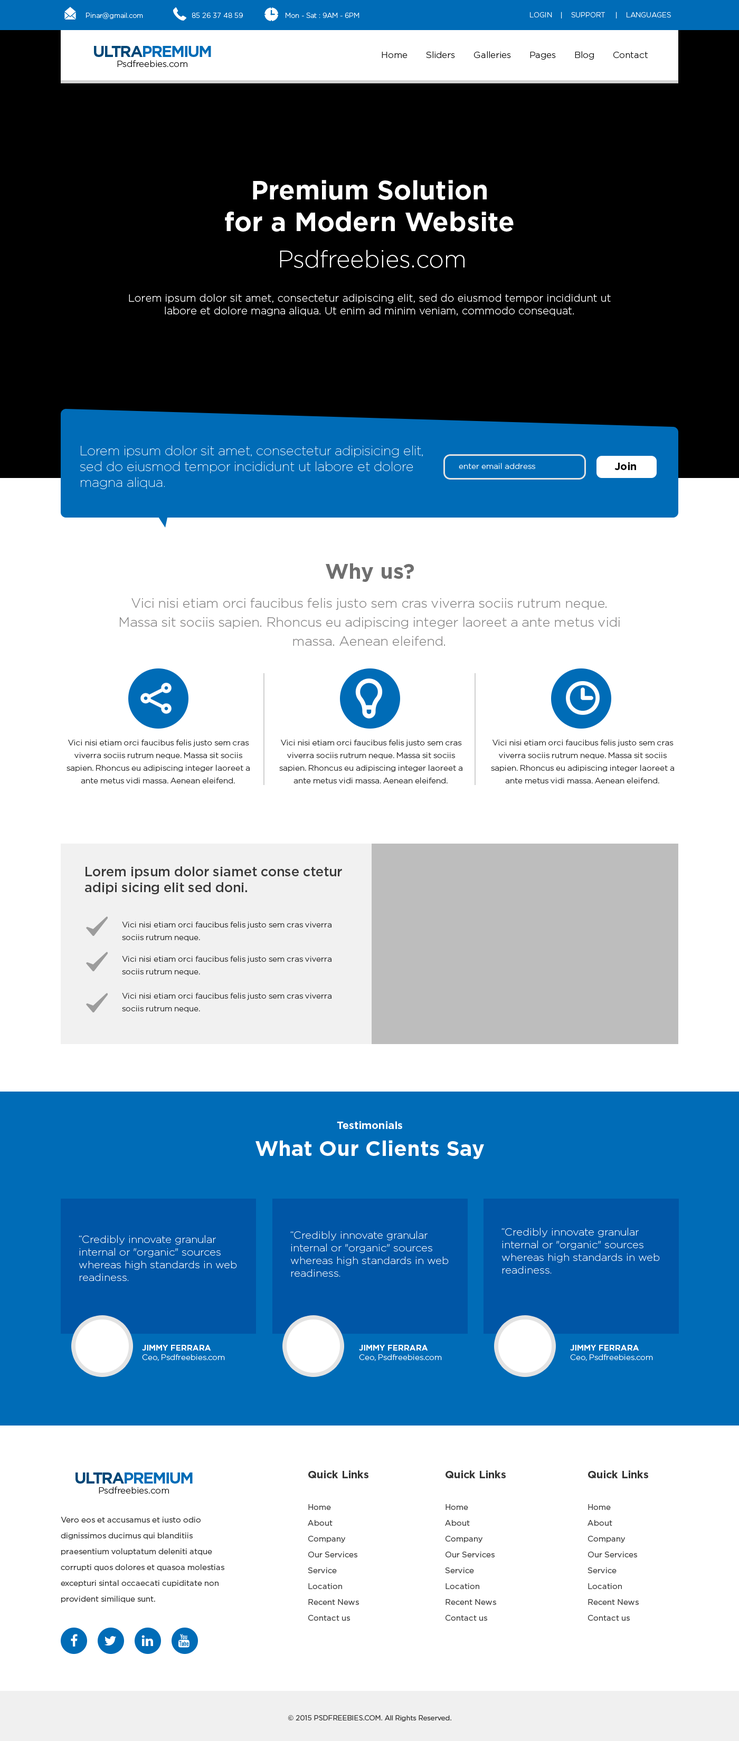
<style>
.page{position:relative;width:739px;height:1741px;background:#ffffff}
.page>*{position:absolute;margin:0}
.t1{font:6.9px "Gotham-Light";color:#ffffff}
.t2{font:15.8px "Gotham-Bold";letter-spacing:-0.075em;color:#006cb7;text-transform:uppercase}
.t3{font:15.8px "Gotham-Bold";letter-spacing:-0.075em;color:#024777;text-transform:uppercase}
.t4{font:9px "Gotham-Light";color:#0a0a0a}
.t5{font:26.4px "Gotham-Bold";color:#ffffff}
.t6{font:23.8px "Gotham-Light";color:#ffffff}
.t7{font:10.6px "Gotham-Light";color:#ffffff}
.t8{font:13.2px "Gotham-Thin";color:#ffffff}
.t9{font:7.9px "Gotham-Light";color:#ffffff}
.t10{font:10.6px "Gotham-Bold";color:#000000}
.t11{font:21.1px "Gotham-Bold";color:#6f6f6f}
.t12{font:13.2px/19px "Gotham-Light";color:#858484}
.t13{font:7.9px/12.7px "Gotham-Light";color:#292929}
.t14{font:13.2px "Gotham-Medium";color:#3b3b3b}
.t15{font:10.6px "Gotham-Bold";color:#ffffff}
.t16{font:21.1px "Gotham-Bold";color:#ffffff}
.t17{font:10.6px "Gotham-ExtraLight";color:#ffffff}
.t18{font:7.9px "Gotham-Bold";color:#ffffff}
.t19{font:7.9px/15.8px "Gotham-Book";color:#363636}
.t20{font:10.6px/15.8px "Gotham-Bold";color:#363636}
.t21{font:7.9px/15.8px "Gotham-Book";color:#303030}
.t22{font:6.9px "Gotham-Book";color:#363636}
</style>
<div class="page">
<p class="t1" style="left:86px;top:13px;width:273px;height:6px">Pinar@gmail.com                       85 26 37 48 59                    Mon - Sat : 9AM - 6PM</p>
<p class="t1" style="left:530px;top:12px;width:141px;height:6px">LOGIN    |    SUPPORT     |    LANGUAGES</p>
<p class="t2" style="left:94px;top:46px;width:117px;height:11px"><span class="t3">ultra</span>premium</p>
<p class="t4" style="left:381px;top:51px;width:266px;height:9px">Home       Sliders       Galleries       Pages       Blog       Contact</p>
<p class="t4" style="left:117px;top:60px;width:70px;height:7px">Psdfreebies.com</p>
<p class="t5" style="left:225px;top:180px;width:288px;height:52px;text-align:center">Premium Solution<br>for a Modern Website</p>
<p class="t6" style="left:280px;top:250px;width:184px;height:18px">Psdfreebies.com</p>
<p class="t7" style="left:129px;top:293px;width:481px;height:23px;text-align:center">Lorem ipsum dolor sit amet, consectetur adipiscing elit, sed do eiusmod tempor incididunt ut labore et dolore magna aliqua. Ut enim ad minim veniam, commodo consequat.</p>
<p class="t8" style="left:80px;top:445px;width:343px;height:44px">Lorem ipsum dolor sit amet, consectetur adipisicing elit, sed do eiusmod tempor incididunt ut labore et dolore magna aliqua.</p>
<p class="t9" style="left:458px;top:463px;width:77px;height:6px">enter email address</p>
<p class="t10" style="left:614px;top:462px;width:22px;height:8px">Join</p>
<p class="t11" style="left:325px;top:563px;width:89px;height:19px">Why us?</p>
<p class="t12" style="left:120px;top:598px;width:499px;height:48px;text-align:center">Vici nisi etiam orci faucibus felis justo sem cras viverra sociis rutrum neque. Massa sit sociis sapien. Rhoncus eu adipiscing integer laoreet a ante metus vidi massa. Aenean eleifend.</p>
<p class="t13" style="left:66px;top:739px;width:184px;height:44px;text-align:center">Vici nisi etiam orci faucibus felis justo sem cras viverra sociis rutrum neque. Massa sit sociis sapien. Rhoncus eu adipiscing integer laoreet a ante metus vidi massa. Aenean eleifend.</p>
<p class="t13" style="left:279px;top:739px;width:183px;height:44px;text-align:center">Vici nisi etiam orci faucibus felis justo sem cras viverra sociis rutrum neque. Massa sit sociis sapien. Rhoncus eu adipiscing integer laoreet a ante metus vidi massa. Aenean eleifend.</p>
<p class="t13" style="left:491px;top:739px;width:183px;height:44px;text-align:center">Vici nisi etiam orci faucibus felis justo sem cras viverra sociis rutrum neque. Massa sit sociis sapien. Rhoncus eu adipiscing integer laoreet a ante metus vidi massa. Aenean eleifend.</p>
<p class="t14" style="left:85px;top:866px;width:257px;height:28px">Lorem ipsum dolor siamet conse ctetur<br>adipi sicing elit sed doni.</p>
<p class="t13" style="left:122px;top:921px;width:209px;height:20px">Vici nisi etiam orci faucibus felis justo sem cras viverra sociis rutrum neque.</p>
<p class="t13" style="left:122px;top:955px;width:209px;height:20px">Vici nisi etiam orci faucibus felis justo sem cras viverra sociis rutrum neque.</p>
<p class="t13" style="left:122px;top:992px;width:209px;height:20px">Vici nisi etiam orci faucibus felis justo sem cras viverra sociis rutrum neque.</p>
<p class="t15" style="left:337px;top:1121px;width:65px;height:8px">Testimonials</p>
<p class="t16" style="left:255px;top:1140px;width:229px;height:19px">What Our Clients Say</p>
<p class="t17" style="left:501px;top:1228px;width:158px;height:45px">“Credibly innovate granular internal or "organic" sources whereas high standards in web readiness.</p>
<p class="t17" style="left:79px;top:1235px;width:158px;height:46px">“Credibly innovate granular internal or "organic" sources whereas high standards in web readiness.</p>
<p class="t17" style="left:290px;top:1231px;width:158px;height:46px">“Credibly innovate granular internal or "organic" sources whereas high standards in web readiness.</p>
<p class="t9" style="left:142px;top:1345px;width:83px;height:16px"><span class="t18">JIMMY FERRARA<br></span>Ceo, Psdfreebies.com</p>
<p class="t9" style="left:359px;top:1345px;width:83px;height:16px"><span class="t18">JIMMY FERRARA<br></span>Ceo, Psdfreebies.com</p>
<p class="t9" style="left:570px;top:1345px;width:83px;height:16px"><span class="t18">JIMMY FERRARA<br></span>Ceo, Psdfreebies.com</p>
<p class="t2" style="left:75px;top:1472px;width:118px;height:11px"><span class="t3">ultra</span>premium</p>
<p class="t19" style="left:308px;top:1470px;width:60px;height:151px"><span class="t20">Quick Links<br><br></span>Home<br>About<br>Company<br>Our Services<br>Service <br>Location<br>Recent News<br>Contact us</p>
<p class="t19" style="left:445px;top:1470px;width:60px;height:151px"><span class="t20">Quick Links<br><br></span>Home<br>About<br>Company<br>Our Services<br>Service <br>Location<br>Recent News<br>Contact us</p>
<p class="t19" style="left:587px;top:1470px;width:61px;height:151px"><span class="t20">Quick Links<br><br></span>Home<br>About<br>Company<br>Our Services<br>Service <br>Location<br>Recent News<br>Contact us</p>
<p class="t4" style="left:99px;top:1487px;width:70px;height:6px">Psdfreebies.com</p>
<p class="t21" style="left:61px;top:1517px;width:163px;height:86px">Vero eos et accusamus et iusto odio dignissimos ducimus qui blanditiis praesentium voluptatum deleniti atque corrupti quos dolores et quasoa molestias excepturi sintal occaecati cupiditate non provident similique sunt.</p>
<p class="t22" style="left:288px;top:1715px;width:163px;height:6px">© 2015 PSDFREEBIES.COM. All Rights Reserved.</p>
</div>
